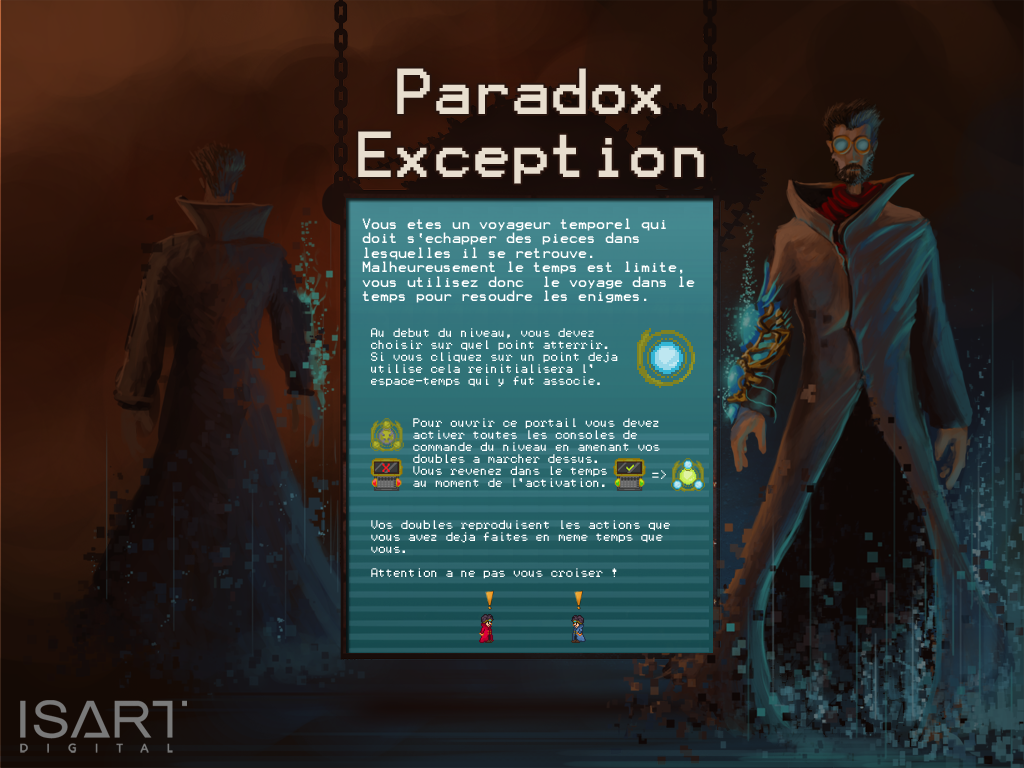
<style>
.page{position:relative;width:1024px;height:768px}
.page>*{position:absolute;margin:0}
.t1{font:12px "Terminal";color:#ffffff}
.t2{font:10px "Terminal";color:#ffffff}
</style>
<div class="page">
<p class="t1" style="left:362px;top:218px;width:333px;height:85px">Vous etes un voyageur temporel qui doit s`echapper des pieces dans lesquelles il se retrouve.<br>Malheureusement le temps est limite, vous utilisez donc  le voyage dans le temps pour resoudre les enigmes.</p>
<p class="t2" style="left:371px;top:328px;width:247px;height:59px">Au debut du niveau, vous devez choisir sur quel point atterrir.<br>Si vous cliquez sur un point deja utilise cela reinitialisera l` espace-temps qui y fut associe.</p>
<p class="t2" style="left:413px;top:418px;width:247px;height:69px">Pour ouvrir ce portail vous devez activer toutes les consoles de <br>commande du niveau en amenant vos doubles a marcher dessus.<br>Vous revenez dans le temps<br>au moment de l`activation.</p>
<p class="t2" style="left:652px;top:470px;width:14px;height:9px">=&gt;</p>
<p class="t2" style="left:371px;top:520px;width:299px;height:59px">Vos doubles reproduisent les actions que vous avez deja faites en meme temps que vous.<br><br>Attention a ne pas vous croiser !</p>
</div>
